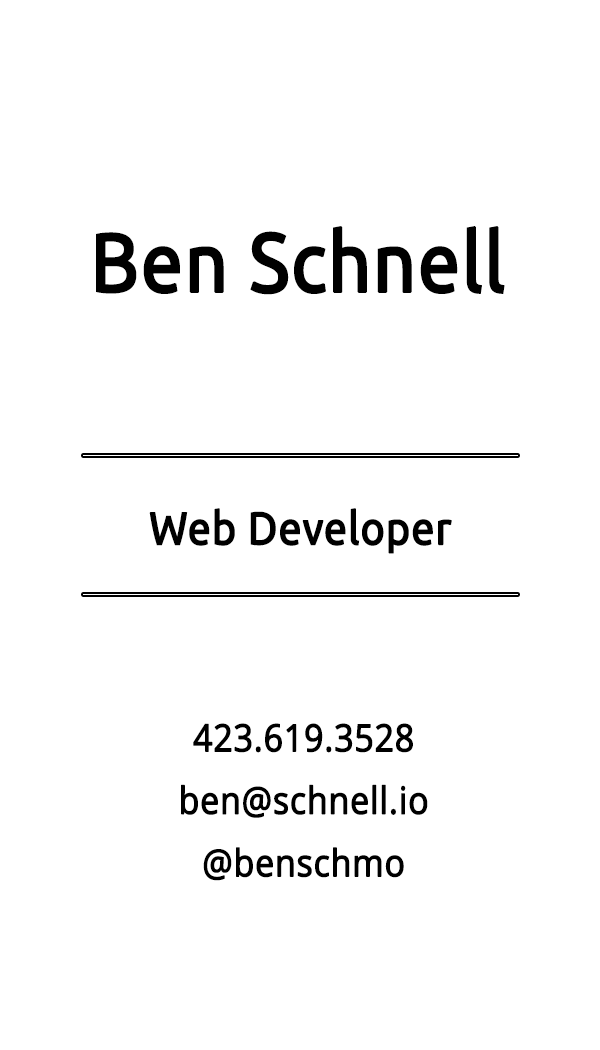
<style>
.page{position:relative;width:600px;height:1050px;background:#ffffff}
.page>*{position:absolute;margin:0}
.t1{font:83.3px "Ubuntu";color:#000000;font-weight:bold;scale:0.9 1}
.t2{font:45.8px "Ubuntu";color:#000000;font-weight:bold;scale:0.9 1}
.t3{font:37.5px/62.5px "OpenSans";color:#000000;font-weight:bold;scale:0.9 1}
</style>
<div class="page">
<p class="t1" style="left:96px;top:226px;width:409px;height:69px">Ben Schnell</p>
<p class="t2" style="left:149px;top:508px;width:303px;height:46px">Web Developer</p>
<p class="t3" style="left:181px;top:723px;width:247px;height:158px;text-align:center">423.619.3528<br>ben@schnell.io<br>@benschmo</p>
</div>
